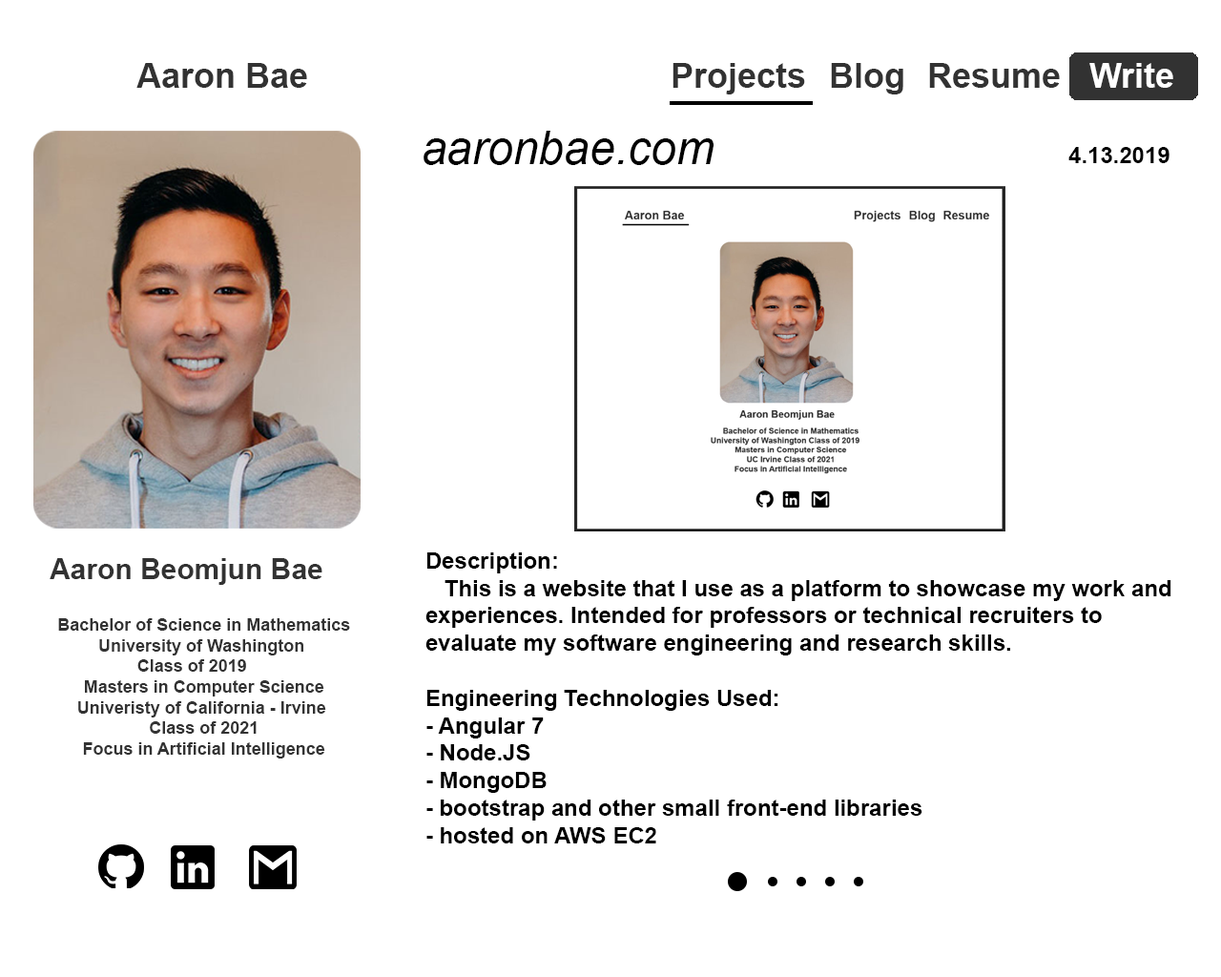
<style>
.page{position:relative;width:1221px;height:977px;background:#ffffff}
.page>*{position:absolute;margin:0}
.t1{font:34.3px "Arial-BoldMT";color:#323232}
.t2{font:45.8px "Arial-ItalicMT";color:#000000}
.t3{font:22.9px "Arial-BoldMT";color:#000000}
.t4{font:28.6px "Arial-BoldMT";color:#323232}
.t5{font:17.2px "Arial-BoldMT";color:#323232}
</style>
<div class="page">
<p class="t1" style="left:136px;top:63px;width:171px;height:25px">Aaron Bae</p>
<p class="t1" style="left:672px;top:63px;width:133px;height:31px">Projects</p>
<p class="t1" style="left:831px;top:63px;width:72px;height:31px">Blog</p>
<p class="t1" style="left:929px;top:63px;width:131px;height:25px">Resume</p>
<p class="t2" style="left:423px;top:131px;width:290px;height:34px">aaronbae.com</p>
<p class="t3" style="left:1068px;top:147px;width:101px;height:16px">4.13.2019</p>
<p class="t4" style="left:50px;top:558px;width:272px;height:27px">Aaron Beomjun Bae</p>
<p class="t3" style="left:425px;top:552px;width:746px;height:291px">Description:<br>   This is a website that I use as a platform to showcase my work and <br>experiences. Intended for professors or technical recruiters to <br>evaluate my software engineering and research skills.<br><br>Engineering Technologies Used:<br>- Angular 7<br>- Node.JS<br>- MongoDB<br>- bootstrap and other small front-end libraries<br>- hosted on AWS EC2</p>
<p class="t5" style="left:58px;top:618px;width:292px;height:140px;text-align:center">Bachelor of Science in Mathematics<br>University of Washington <br>Class of 2019     <br>Masters in Computer Science<br>Univeristy of California - Irvine <br>Class of 2021<br>Focus in Artificial Intelligence</p>
</div>
